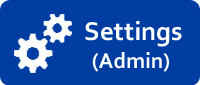
<style>
.page{position:relative;width:200px;height:85px;background:#003da3}
.page>*{position:absolute;margin:0}
.t1{font:26.9px "Corbel-Bold";color:#feffff}
.t2{font:22.4px "Corbel-Bold";color:#feffff}
</style>
<div class="page">
<p class="t1" style="left:85px;top:21px;width:97px;height:26px">Settings</p>
<p class="t2" style="left:92px;top:52px;width:77px;height:20px">(Admin)</p>
</div>
